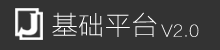
<style>
.page{position:relative;width:220px;height:50px;background:#333333}
.page>*{position:absolute;margin:0}
.t1{font:26.3px "FZLTCXHJW--GB1-0";color:#ffffff;font-weight:bold}
.t2{font:16px "FZLTCXHJW--GB1-0";font-weight:bold}
</style>
<div class="page">
<p class="t1" style="left:52px;top:12px;width:105px;height:25px">基础平台</p>
<p class="t2" style="left:161px;top:24px;width:38px;height:13px">V2.0</p>
</div>
